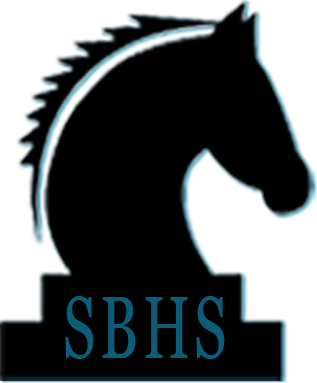
<style>
.page{position:relative;width:317px;height:383px;background:#000000}
.page>*{position:absolute;margin:0}
.t1{font:87.7px "Georgia";letter-spacing:0.075em;color:#0b5d78;scale:0.66 1}
</style>
<div class="page">
<p class="t1" style="left:65px;top:296px;width:160px;height:63px">SBHS</p>
</div>
